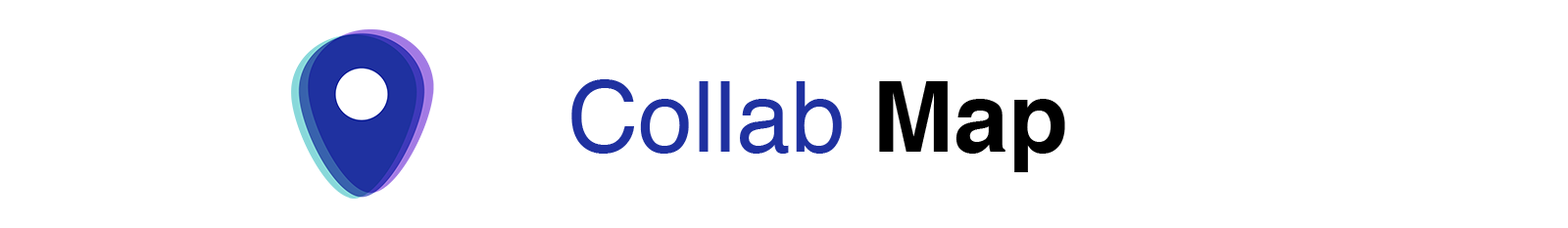
<style>
.page{position:relative;width:1568px;height:228px;background:#ffffff}
.page>*{position:absolute;margin:0}
.t1{font:98px "Helvetica";color:#1f31a0}
.t2{font:98px "Helvetica-Bold";color:#000000}
</style>
<div class="page">
<p class="t1" style="left:571px;top:79px;width:494px;height:93px">Collab <span class="t2">Map</span></p>
</div>
